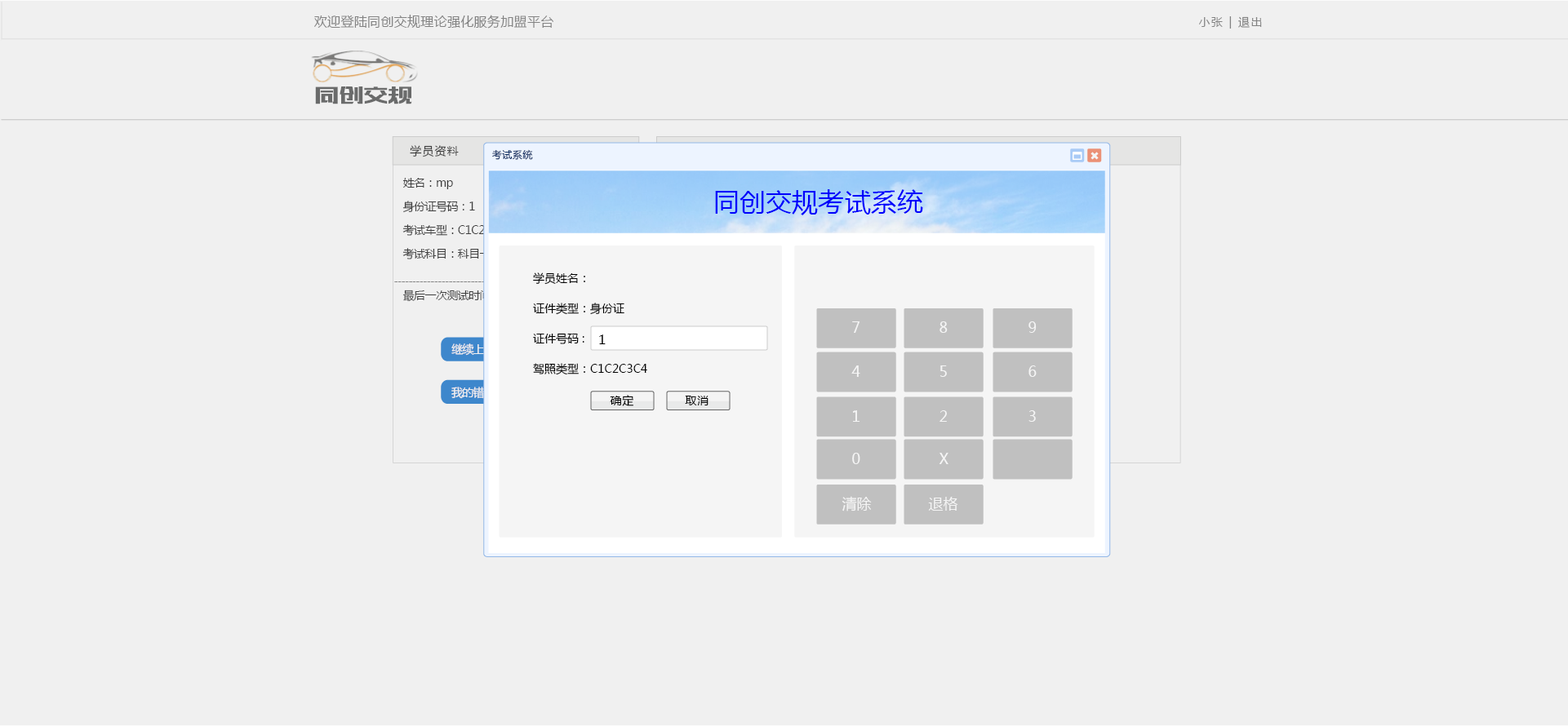
<style>
.page{position:relative;width:1568px;height:726px;background:#f0f0f0}
.page>*{position:absolute;margin:0}
.t1{font:13.1px "MicrosoftYaHei";letter-spacing:0.02em;color:#838383}
.t2{font:11.4px "MicrosoftYaHei";letter-spacing:0.12em;color:#838383}
.t3{font:23.3px "MFBanHei_Noncommercial-Regular";letter-spacing:0.055em;color:#6a6b6b;text-transform:uppercase}
.t4{font:11.4px "MicrosoftYaHei";letter-spacing:0.08em;color:#3e3e3e}
.t5{font:9.8px "MicrosoftYaHei";letter-spacing:0.04em;color:#0d2d61}
.t6{font:11.4px/23.5px "MicrosoftYaHei";letter-spacing:-0.04em;color:#3e3e3e}
.t7{font:26.3px "MicrosoftYaHei";color:#0000fc}
.t8{font:11.4px/30px "MicrosoftYaHei";color:#000000}
.t9{font:11.4px "MicrosoftYaHei";letter-spacing:-0.04em}
.t10{font:14.7px "MicrosoftYaHei";color:#f5f5f5}
.t11{font:13.1px "MicrosoftYaHei";color:#000000}
.t12{font:11.4px "MicrosoftYaHei";letter-spacing:-0.06em;color:#ffffff}
.t13{font:11.4px "MicrosoftYaHei";letter-spacing:0.06em;color:#000000}
</style>
<div class="page">
<p class="t1" style="left:314px;top:15px;width:239px;height:14px">欢迎登陆同创交规理论强化服务加盟平台</p>
<p class="t2" style="left:1199px;top:16px;width:63px;height:13px">小张 | 退出</p>
<p class="t3" style="left:315px;top:87px;width:97px;height:17px">同创交规</p>
<p class="t4" style="left:410px;top:145px;width:49px;height:13px">学员资料</p>
<p class="t5" style="left:492px;top:149px;width:41px;height:11px">考试系统</p>
<p class="t6" style="left:402px;top:178px;width:110px;height:82px">姓名：mp<br>身份证号码：1<br>考试车型：C1C2C3C4<br>考试科目：科目一</p>
<p class="t7" style="left:715px;top:189px;width:208px;height:26px">同创交规考试系统</p>
<p class="t8" style="left:533px;top:273px;width:114px;height:102px">学员姓名：<br>证件类型：身份证<br>证件号码 :  <br>驾照类型：C1C2C3C4</p>
<p class="t9" style="left:402px;top:290px;width:213px;height:12px">最后一次测试时间：2017-03-29 09:90:50.0</p>
<p class="t10" style="left:852px;top:322px;width:8px;height:11px">7</p>
<p class="t10" style="left:939px;top:322px;width:9px;height:11px">8</p>
<p class="t10" style="left:1028px;top:322px;width:9px;height:11px">9</p>
<p class="t11" style="left:599px;top:335px;width:7px;height:9px">1</p>
<p class="t12" style="left:451px;top:344px;width:44px;height:12px">继续上次</p>
<p class="t10" style="left:851px;top:366px;width:9px;height:11px">4</p>
<p class="t10" style="left:939px;top:366px;width:8px;height:11px">5</p>
<p class="t10" style="left:1028px;top:366px;width:9px;height:11px">6</p>
<p class="t12" style="left:451px;top:387px;width:44px;height:12px">我的错题</p>
<p class="t13" style="left:610px;top:395px;width:23px;height:11px">确定</p>
<p class="t13" style="left:685px;top:396px;width:23px;height:10px">取消</p>
<p class="t10" style="left:853px;top:411px;width:7px;height:11px">1</p>
<p class="t10" style="left:939px;top:411px;width:8px;height:11px">2</p>
<p class="t10" style="left:1028px;top:411px;width:8px;height:11px">3</p>
<p class="t10" style="left:852px;top:453px;width:8px;height:11px">0</p>
<p class="t10" style="left:939px;top:453px;width:9px;height:11px">X</p>
<p class="t10" style="left:842px;top:496px;width:30px;height:16px">清除</p>
<p class="t10" style="left:928px;top:497px;width:30px;height:14px">退格</p>
</div>
